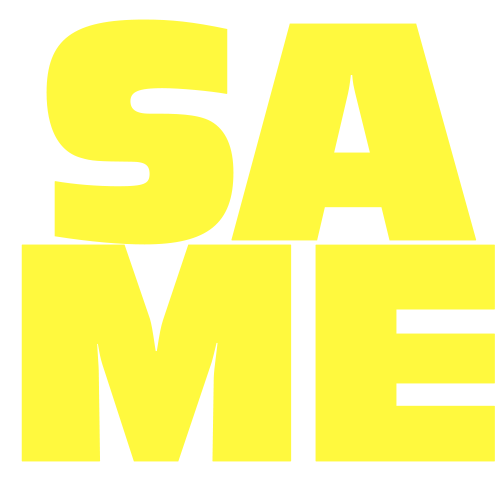
<style>
.page{position:relative;width:500px;height:478px;background:#fff93e}
.page>*{position:absolute;margin:0}
.t1{font:323.8px/221.8px "AntiqueOliCom-Reg";letter-spacing:-0.05em;color:#fff93e;font-weight:bold}
</style>
<div class="page">
<p class="t1" style="left:21px;top:19px;width:474px;height:443px;text-align:center">SA<br>ME</p>
</div>
